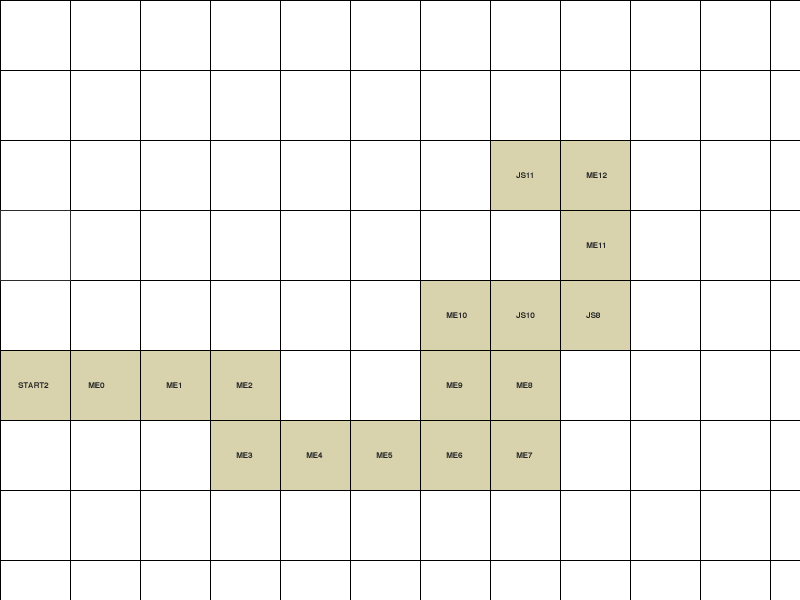
<style>
.page{position:relative;width:800px;height:600px;background:#ffffff}
.page>*{position:absolute;margin:0}
.t1{font:8px "Helvetica-Bold";color:#262626}
</style>
<div class="page">
<p class="t1" style="left:516px;top:172px;width:17px;height:6px">JS11</p>
<p class="t1" style="left:586px;top:172px;width:21px;height:6px">ME12</p>
<p class="t1" style="left:586px;top:242px;width:19px;height:6px">ME11</p>
<p class="t1" style="left:446px;top:312px;width:21px;height:6px">ME10</p>
<p class="t1" style="left:516px;top:312px;width:19px;height:6px">JS10</p>
<p class="t1" style="left:586px;top:312px;width:14px;height:6px">JS8</p>
<p class="t1" style="left:18px;top:382px;width:31px;height:6px">START2</p>
<p class="t1" style="left:88px;top:382px;width:17px;height:6px">ME0</p>
<p class="t1" style="left:166px;top:382px;width:15px;height:6px">ME1</p>
<p class="t1" style="left:236px;top:382px;width:17px;height:6px">ME2</p>
<p class="t1" style="left:446px;top:382px;width:17px;height:6px">ME9</p>
<p class="t1" style="left:516px;top:382px;width:17px;height:6px">ME8</p>
<p class="t1" style="left:236px;top:452px;width:17px;height:6px">ME3</p>
<p class="t1" style="left:306px;top:452px;width:17px;height:6px">ME4</p>
<p class="t1" style="left:376px;top:452px;width:17px;height:6px">ME5</p>
<p class="t1" style="left:446px;top:452px;width:17px;height:6px">ME6</p>
<p class="t1" style="left:516px;top:452px;width:17px;height:6px">ME7</p>
</div>
